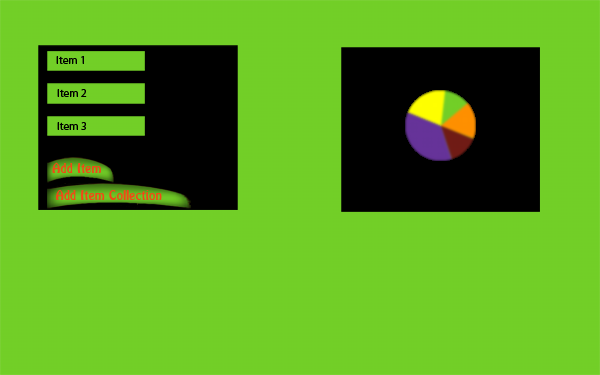
<style>
.page{position:relative;width:600px;height:375px;background:#72cf27}
.page>*{position:absolute;margin:0}
.t1{font:11.2px "MyriadPro-Regular";color:#000000}
.t2{font:12.2px "CyrillicHover";color:#f04a17}
</style>
<div class="page">
<p class="t1" style="left:56px;top:56px;width:28px;height:8px">Item 1</p>
<p class="t1" style="left:57px;top:89px;width:30px;height:8px">Item 2</p>
<p class="t1" style="left:57px;top:122px;width:29px;height:8px">Item 3</p>
<p class="t2" style="left:52px;top:162px;width:49px;height:11px">Add Item</p>
<p class="t2" style="left:55px;top:189px;width:107px;height:11px">Add Item Collection</p>
</div>
